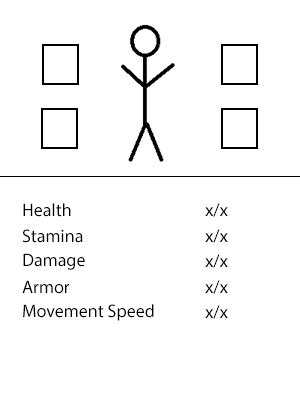
<style>
.page{position:relative;width:300px;height:400px;background:#ffffff}
.page>*{position:absolute;margin:0}
.t1{font:18px "MyriadPro-Regular";color:#000000}
</style>
<div class="page">
<p class="t1" style="left:23px;top:203px;width:48px;height:14px">Health</p>
<p class="t1" style="left:205px;top:203px;width:23px;height:14px">x/x</p>
<p class="t1" style="left:22px;top:229px;width:61px;height:14px">Stamina</p>
<p class="t1" style="left:205px;top:229px;width:23px;height:14px">x/x</p>
<p class="t1" style="left:23px;top:253px;width:62px;height:17px">Damage</p>
<p class="t1" style="left:205px;top:254px;width:23px;height:14px">x/x</p>
<p class="t1" style="left:22px;top:280px;width:48px;height:14px">Armor</p>
<p class="t1" style="left:205px;top:280px;width:23px;height:14px">x/x</p>
<p class="t1" style="left:23px;top:304px;width:131px;height:17px">Movement Speed</p>
<p class="t1" style="left:205px;top:305px;width:23px;height:14px">x/x</p>
</div>
